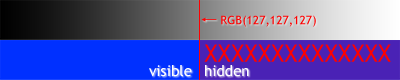
<style>
.page{position:relative;width:400px;height:80px;background:#0030ff}
.page>*{position:absolute;margin:0}
.t1{font:12px "TrebuchetMS";color:#ff0000}
.t2{font:24px "TrebuchetMS";color:#ff0000}
.t3{font:15px "TrebuchetMS";color:#ffffff}
</style>
<div class="page">
<p class="t1" style="left:221px;top:15px;width:95px;height:12px">RGB(127,127,127)</p>
<p class="t2" style="left:204px;top:44px;width:187px;height:18px">XXXXXXXXXXXXXX</p>
<p class="t3" style="left:149px;top:65px;width:43px;height:12px">visible</p>
<p class="t3" style="left:205px;top:65px;width:44px;height:12px">hidden</p>
</div>
